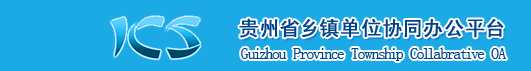
<style>
.page{position:relative;width:531px;height:71px;background:#1caae7}
.page>*{position:absolute;margin:0}
.t1{font:20px "SimHei";letter-spacing:0.1em;color:#014288;font-weight:bold}
.t2{font:16px "NSimSun";letter-spacing:-0.025em;color:#014288}
</style>
<div class="page">
<p class="t1" style="left:239px;top:18px;width:265px;height:20px">贵州省乡镇单位协同办公平台</p>
<p class="t2" style="left:241px;top:47px;width:266px;height:14px">Guizhou Province Township Collabrative OA</p>
</div>
